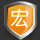
<style>
.page{position:relative;width:40px;height:40px}
.page>*{position:absolute;margin:0}
.t1{font:18.5px "YouYuan";color:#ffffff;font-weight:bold}
</style>
<div class="page">
<p class="t1" style="left:10px;top:8px;width:19px;height:20px">宏</p>
</div>
